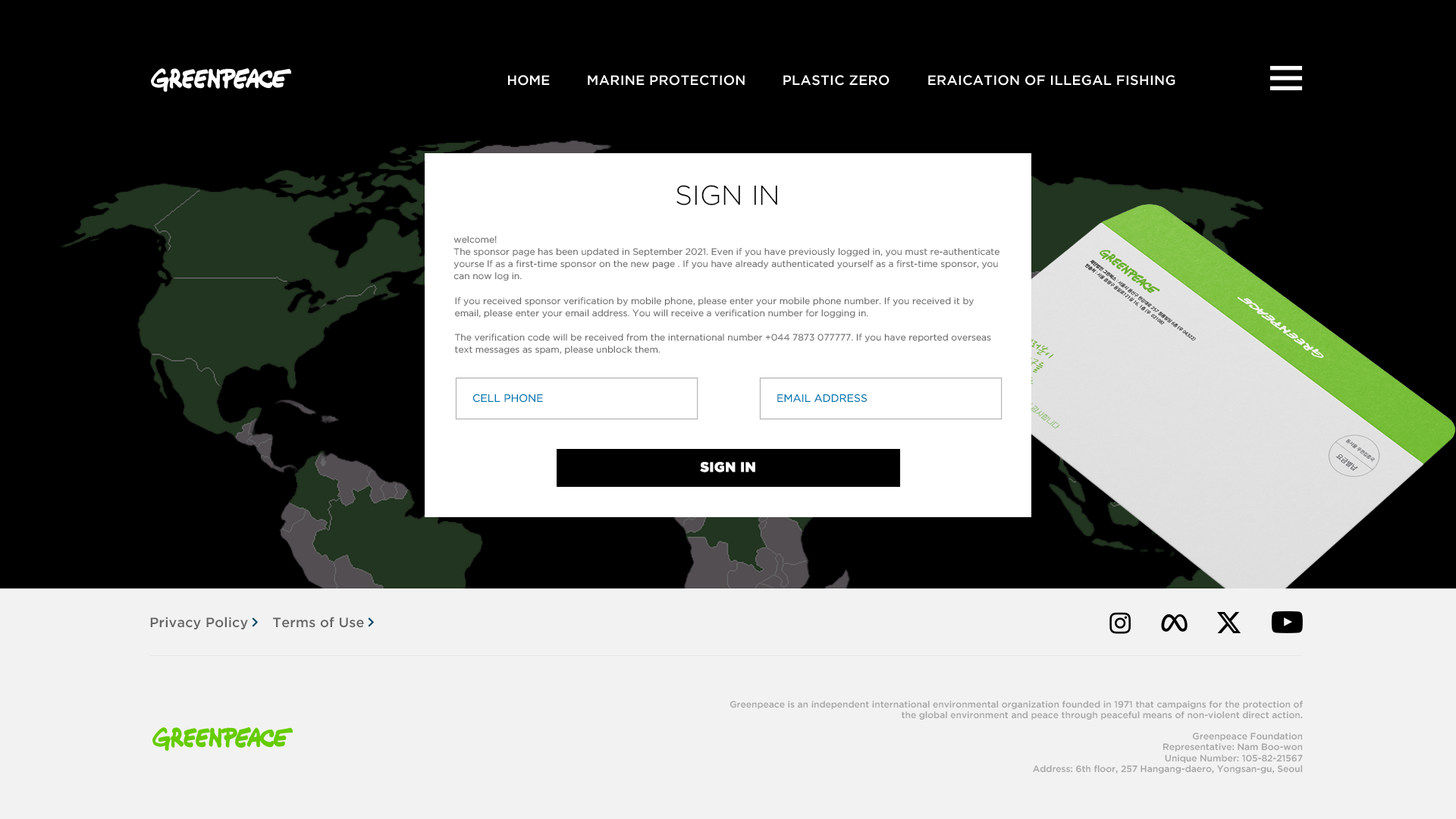
<style>
.page{position:relative;width:1456px;height:819px;background:#000000}
.page>*{position:absolute;margin:0}
.t1{font:13.6px "GothamPro-Medium";color:#ffffff}
.t2{font:13.6px "GothamPro-Medium";color:#ffffff;text-transform:uppercase}
.t3{font:27.3px "GothamPro-Light";color:#000000}
.t4{font:9.1px/12.1px "GothamPro";color:#666666}
.t5{font:10.6px "GothamPro";color:#007ab3}
.t6{font:13.6px "GothamPro-Black";letter-spacing:0.025em;color:#ffffff}
.t7{font:13.6px "GothamPro-Medium";letter-spacing:0.01em;color:#666666}
.t8{font:9.1px "GothamPro-Medium";color:#a6a6a6}
</style>
<div class="page">
<p class="t1" style="left:508px;top:75px;width:42px;height:11px">HOME</p>
<p class="t2" style="left:588px;top:75px;width:157px;height:11px">Marine protection</p>
<p class="t2" style="left:783px;top:75px;width:107px;height:11px">Plastic Zero</p>
<p class="t2" style="left:928px;top:75px;width:247px;height:11px">Eraication of illegal fishing</p>
<p class="t3" style="left:676px;top:185px;width:101px;height:21px">SIGN IN</p>
<p class="t4" style="left:453px;top:236px;width:546px;height:45px">welcome!<br>The sponsor page has been updated in September 2021. Even if you have previously logged in, you must re-authenticate yourse lf as a first-time sponsor on the new page . If you have already authenticated yourself as a first-time sponsor, you can now log in.</p>
<p class="t4" style="left:455px;top:297px;width:519px;height:21px">If you received sponsor verification by mobile phone, please enter your mobile phone number. If you received it by email, please enter your email address. You will receive a verification number for logging in.</p>
<p class="t4" style="left:454px;top:334px;width:537px;height:21px">The verification code will be received from the international number +044 7873 077777. If you have reported overseas text messages as spam, please unblock them.</p>
<p class="t5" style="left:472px;top:394px;width:71px;height:9px">CELL PHONE</p>
<p class="t5" style="left:777px;top:394px;width:91px;height:9px">EMAIL ADDRESS</p>
<p class="t6" style="left:700px;top:462px;width:55px;height:10px">SIGN IN</p>
<p class="t7" style="left:150px;top:617px;width:98px;height:12px">Privacy Policy</p>
<p class="t7" style="left:273px;top:617px;width:91px;height:11px">Terms of Use</p>
<p class="t8" style="left:730px;top:701px;width:573px;height:19px;text-align:right">Greenpeace is an independent international environmental organization founded in 1971 that campaigns for the protection of the global environment and peace through peaceful means of non-violent direct action.</p>
<p class="t8" style="left:1033px;top:733px;width:270px;height:41px;text-align:right">Greenpeace Foundation<br>Representative: Nam Boo-won<br>Unique Number: 105-82-21567<br>Address: 6th floor, 257 Hangang-daero, Yongsan-gu, Seoul</p>
</div>
